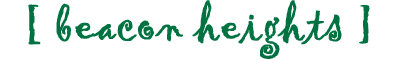
<style>
.page{position:relative;width:396px;height:60px;background:#ffffff}
.page>*{position:absolute;margin:0}
.t1{font:47.3px "Gigi-Regular";color:#007241;font-weight:bold}
</style>
<div class="page">
<p class="t1" style="left:28px;top:0px;width:342px;height:59px">[ beacon heights ]</p>
</div>
